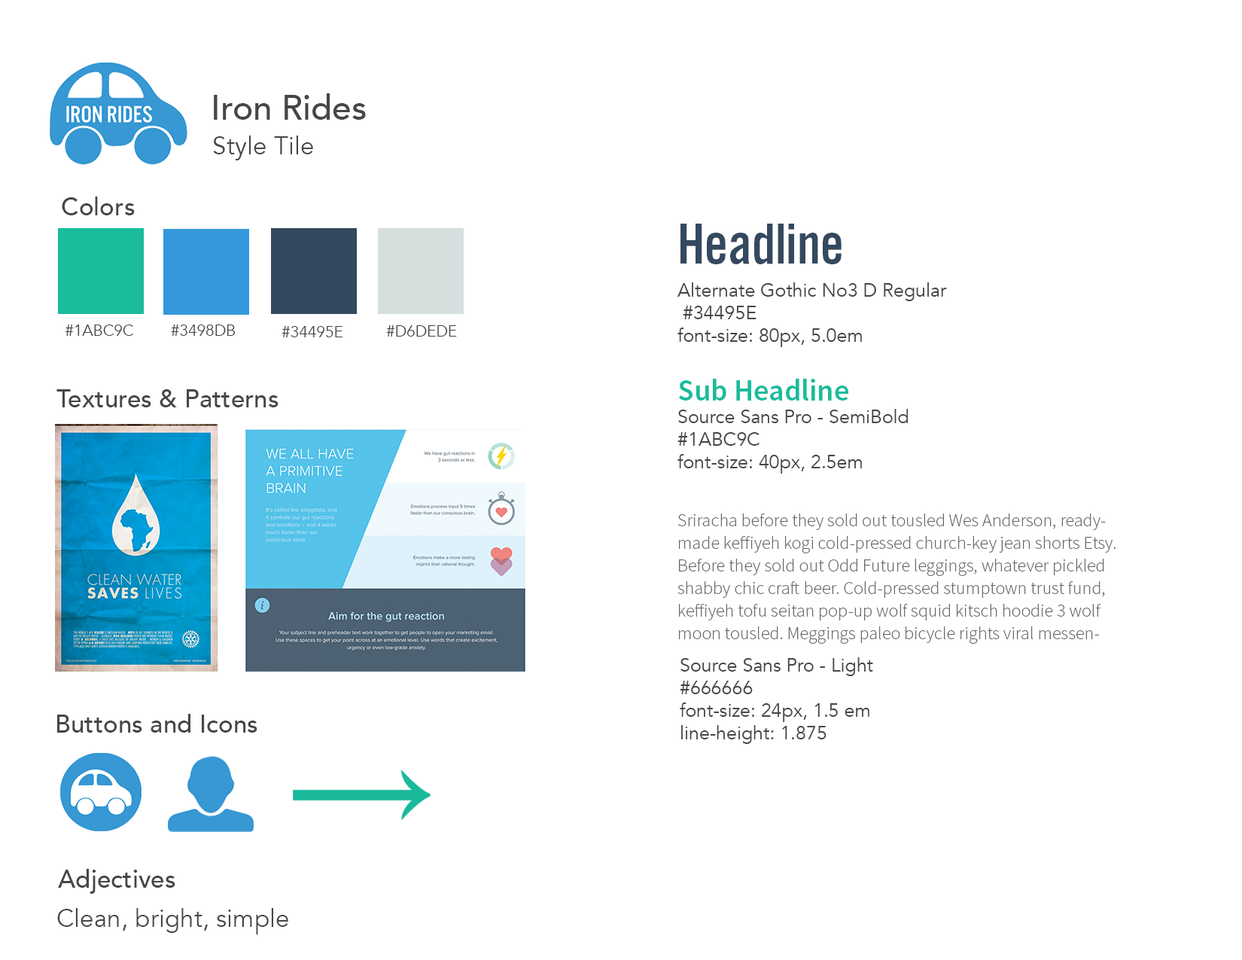
<style>
.page{position:relative;width:1242px;height:960px;background:#ffffff}
.page>*{position:absolute;margin:0}
.t1{font:34.5px "Avenir-Medium";color:#464646}
.t2{font:25.1px "Avenir-Book";color:#464646}
.t3{font:25.1px "Avenir-Medium";color:#464646}
.t4{font:60.2px "AlternateGotNo3D";color:#34495e}
.t5{font:18.8px "Avenir-Book";color:#464646}
.t6{font:15.7px "Avenir-Book";color:#464646}
.t7{font:30.1px "SourceSansPro-Semibold";color:#1abc9c}
.t8{font:18.1px/22.6px "SourceSansPro-Light";color:#666666}
.t9{font:18.1px/22.6px "SourceSansPro-Light";color:#464646}
</style>
<div class="page">
<p class="t1" style="left:214px;top:93px;width:152px;height:27px">Iron Rides</p>
<p class="t2" style="left:213px;top:136px;width:100px;height:24px">Style Tile</p>
<p class="t3" style="left:62px;top:196px;width:73px;height:19px">Colors</p>
<p class="t4" style="left:681px;top:224px;width:161px;height:40px">Headline</p>
<p class="t5" style="left:678px;top:282px;width:269px;height:65px">Alternate Gothic No3 D Regular<br> #34495E<br>font-size: 80px, 5.0em</p>
<p class="t6" style="left:65px;top:324px;width:68px;height:12px">#1ABC9C</p>
<p class="t6" style="left:171px;top:324px;width:64px;height:12px">#3498DB</p>
<p class="t6" style="left:282px;top:326px;width:61px;height:11px">#34495E</p>
<p class="t6" style="left:386px;top:325px;width:71px;height:12px">#D6DEDE</p>
<p class="t3" style="left:56px;top:389px;width:223px;height:18px">Textures &amp; Patterns</p>
<p class="t5" style="left:678px;top:379px;width:231px;height:95px"><span class="t7">Sub Headline<br></span>Source Sans Pro - SemiBold<br>#1ABC9C<br>font-size: 40px, 2.5em</p>
<p class="t8" style="left:678px;top:513px;width:438px;height:131px">Sriracha before they sold out tousled Wes Anderson, readymade keffiyeh kogi cold-pressed church-key jean shorts Etsy. Before they sold out Odd Future leggings, whatever pickled shabby chic craft beer. Cold-pressed stumptown trust fund, keffiyeh tofu seitan pop-up wolf squid kitsch hoodie 3 wolf moon tousled. Meggings paleo bicycle rights viral messen<span class="t9">moon, PBR cray.</span></p>
<p class="t5" style="left:680px;top:657px;width:193px;height:87px">Source Sans Pro - Light<br>#666666<br>font-size: 24px, 1.5 em<br>line-height: 1.875</p>
<p class="t3" style="left:57px;top:714px;width:200px;height:19px">Buttons and Icons</p>
<p class="t3" style="left:58px;top:869px;width:117px;height:25px">Adjectives</p>
<p class="t2" style="left:57px;top:908px;width:231px;height:26px">Clean, bright, simple</p>
</div>
